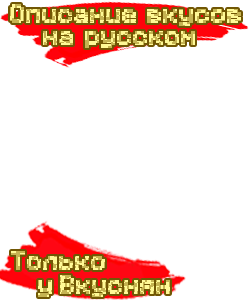
<style>
.page{position:relative;width:252px;height:300px;background:#ffffff}
.page>*{position:absolute;margin:0}
.t1{font:20px "Minecraft";font-weight:bold}
</style>
<div class="page">
<p class="t1" style="left:10px;top:4px;width:126px;height:19px">Описание</p>
<p class="t1" style="left:147px;top:9px;width:94px;height:17px">вкусов</p>
<p class="t1" style="left:43px;top:31px;width:30px;height:14px">на</p>
<p class="t1" style="left:85px;top:31px;width:110px;height:17px">русском</p>
<p class="t1" style="left:11px;top:251px;width:94px;height:19px">Только</p>
<p class="t1" style="left:38px;top:275px;width:132px;height:22px">у Вкуснян</p>
</div>
